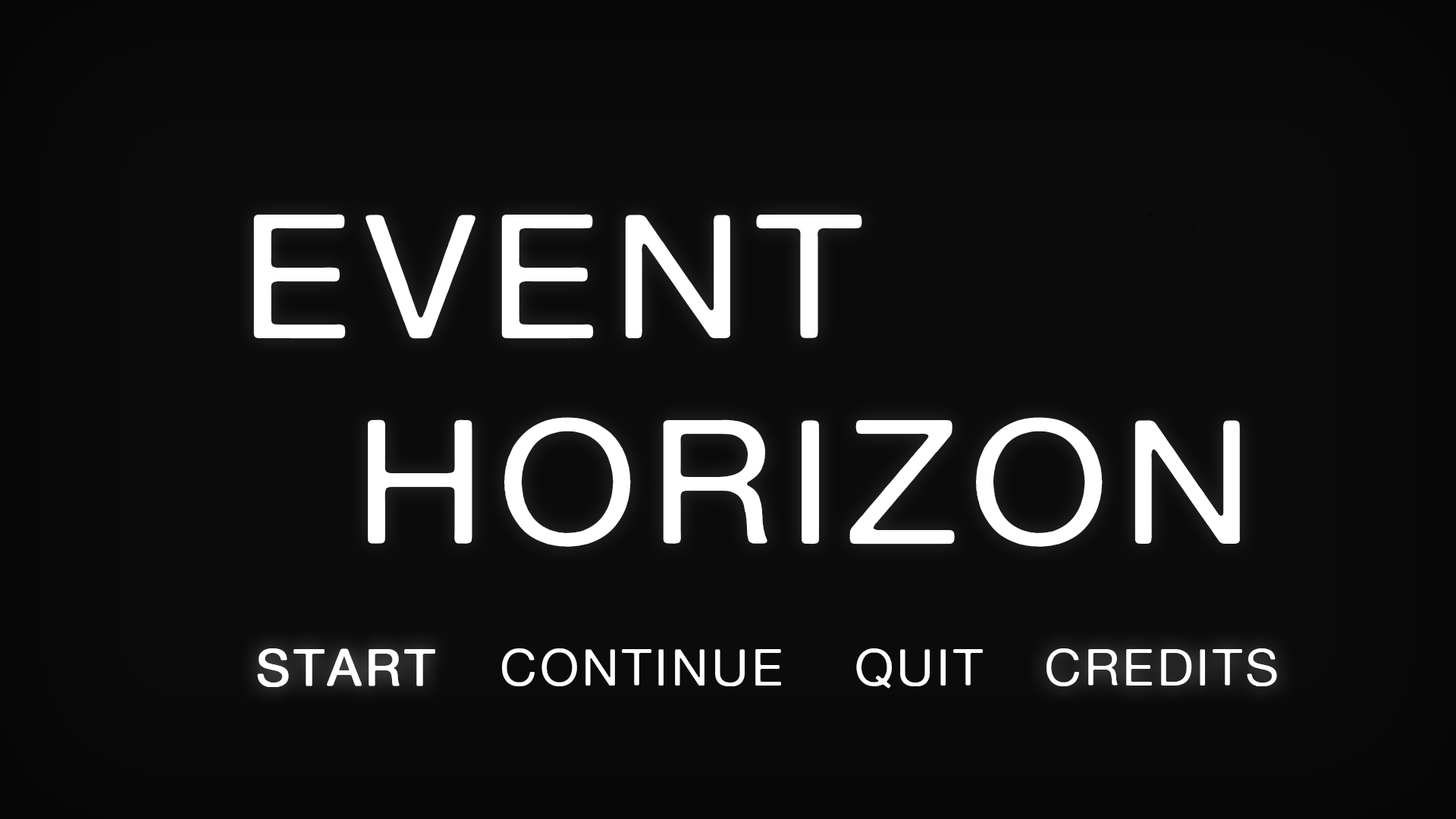
<style>
.page{position:relative;width:1456px;height:819px;background:#0b0b0b}
.page>*{position:absolute;margin:0}
.t1{font:173.1px "AlteHaasGrotesk";letter-spacing:0.06em;color:#ffffff;scale:1.07 1}
.t2{font:51px "AlteHaasGrotesk";letter-spacing:0.06em;color:#ffffff;font-weight:bold}
.t3{font:51px "AlteHaasGrotesk";letter-spacing:0.06em;color:#ffffff}
</style>
<div class="page">
<p class="t1" style="left:253px;top:214px;width:609px;height:125px">EVENT</p>
<p class="t1" style="left:368px;top:417px;width:872px;height:130px">HORIZON</p>
<p class="t2" style="left:257px;top:648px;width:178px;height:39px">START</p>
<p class="t3" style="left:502px;top:648px;width:279px;height:38px">CONTINUE</p>
<p class="t3" style="left:856px;top:648px;width:127px;height:41px">QUIT</p>
<p class="t3" style="left:1046px;top:648px;width:231px;height:38px">CREDITS</p>
</div>
